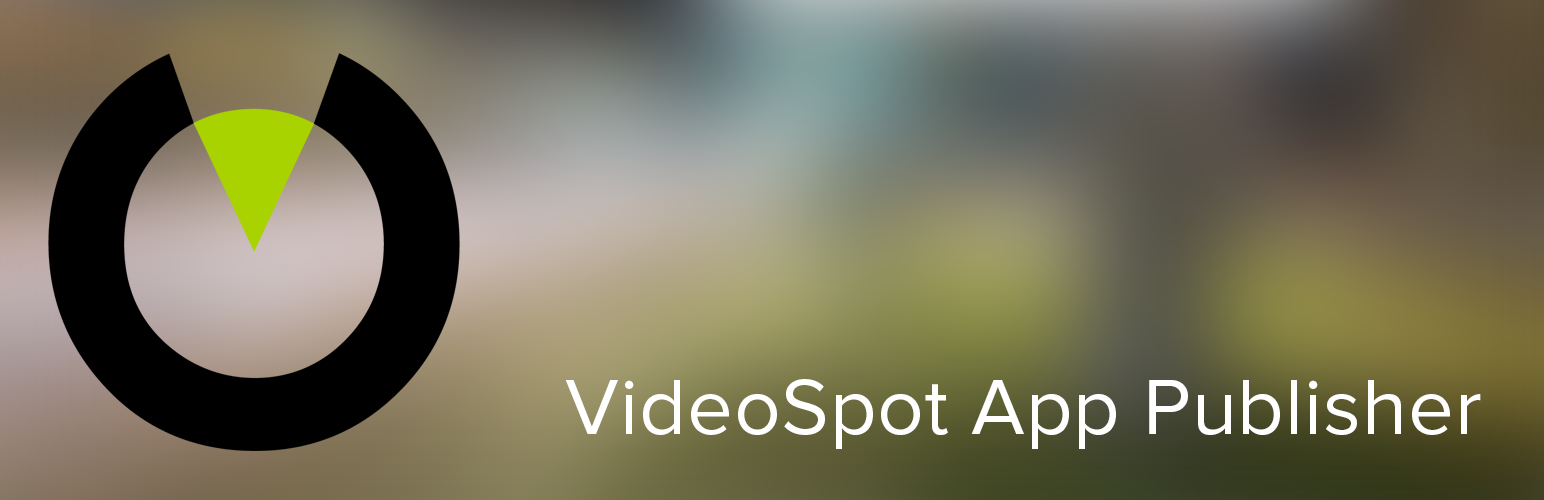
<style>
.page{position:relative;width:1544px;height:500px}
.page>*{position:absolute;margin:0}
.t1{font:81.6px "ProximaNova-Regular";letter-spacing:0.01em;color:#ffffff}
</style>
<div class="page">
<p class="t1" style="left:565px;top:379px;width:916px;height:70px">VideoSpot App Publisher</p>
</div>
